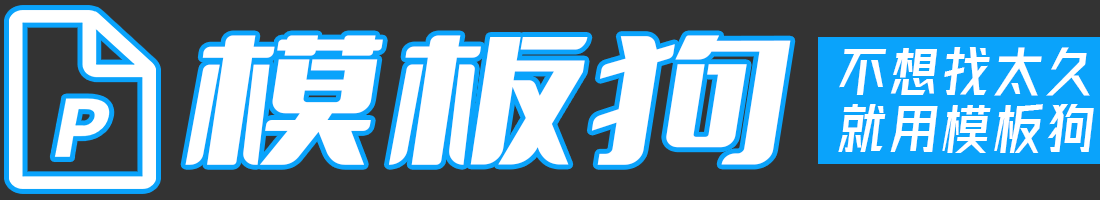
<style>
.page{position:relative;width:1100px;height:200px;background:#333333}
.page>*{position:absolute;margin:0}
.t1{font:137.5px "DOUYU-Font";color:#ffffff;scale:1.14 1}
.t2{font:51.8px/57px "FontquanXinYiGuanHeiTi-Regular";letter-spacing:0.06em;color:#ffffff;scale:1.1 1}
</style>
<div class="page">
<p class="t1" style="left:185px;top:35px;width:606px;height:130px">模板狗</p>
<p class="t2" style="left:838px;top:47px;width:256px;height:106px">不想找太久<br>就用模板狗</p>
</div>
